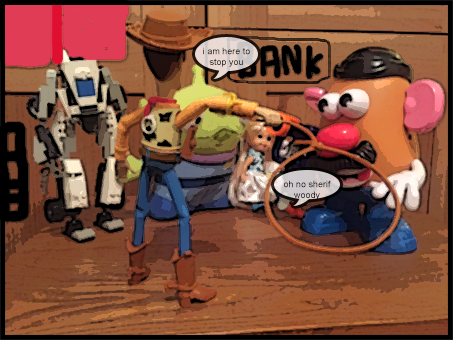
<style>
.page{position:relative;width:454px;height:340px}
.page>*{position:absolute;margin:0}
.t1{font:9px "ArialMT"}
.t2{font:9px "ArialMT";color:#060606}
</style>
<div class="page">
<p class="t1" style="left:203px;top:47px;width:47px;height:20px;text-align:center">i am here to stop you</p>
<p class="t2" style="left:284px;top:180px;width:47px;height:20px;text-align:center">oh no sherif woody</p>
</div>
